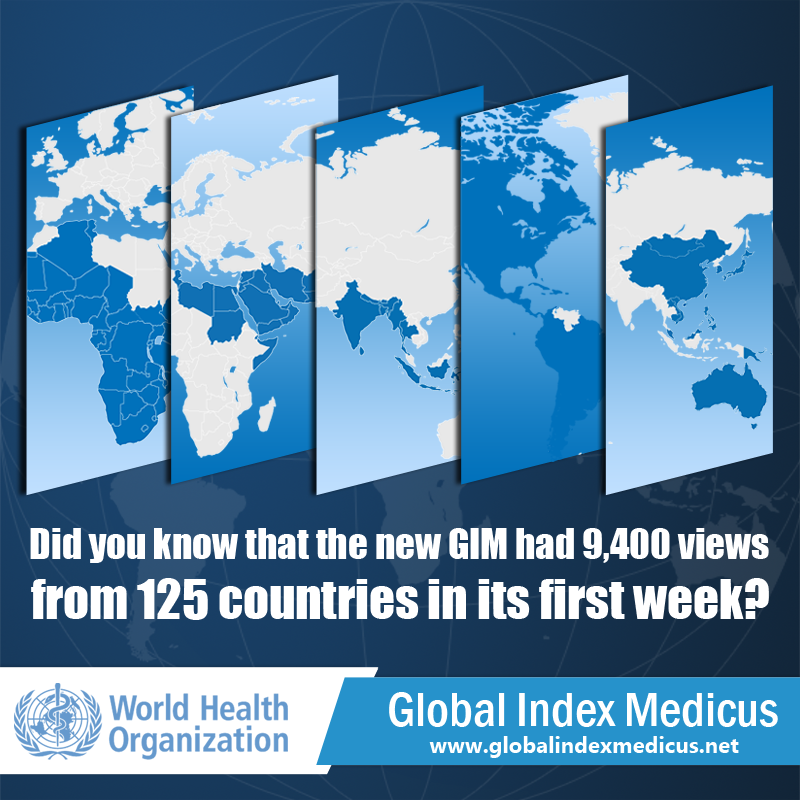
<style>
.page{position:relative;width:800px;height:800px}
.page>*{position:absolute;margin:0}
.t1{font:38.9px "Impact";color:#ffffff}
.t2{font:50.6px "Impact";color:#ffffff}
.t3{font:49.7px "FranklinGothic-MediumCond";color:#ffffff}
.t4{font:22.2px "Gadugi-Bold";color:#ffffff}
</style>
<div class="page">
<p class="t1" style="left:30px;top:528px;width:739px;height:92px;text-align:right">Did you know that the new GIM had 9,400 views<br><span class="t2">from 125 countries in its first week?</span></p>
<p class="t3" style="left:389px;top:692px;width:389px;height:35px">Global Index Medicus</p>
<p class="t4" style="left:429px;top:736px;width:310px;height:22px">www.globalindexmedicus.net</p>
</div>
